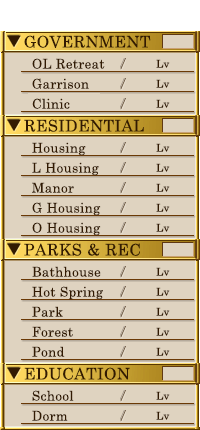
<style>
.page{position:relative;width:200px;height:430px;background:#dfd3c0}
.page>*{position:absolute;margin:0}
.t1{font:16px "CenturySchoolbook";letter-spacing:0.025em;color:#321a02}
.t2{font:13.3px "CenturySchoolbook";letter-spacing:0.025em;color:#321a02}
.t3{font:10.7px "CenturySchoolbook";letter-spacing:0.025em;color:#321a02}
</style>
<div class="page">
<p class="t1" style="left:24px;top:35px;width:127px;height:13px">GOVERNMENT</p>
<p class="t2" style="left:32px;top:58px;width:73px;height:11px">OL Retreat</p>
<p class="t3" style="left:156px;top:59px;width:14px;height:9px">Lv</p>
<p class="t2" style="left:32px;top:78px;width:57px;height:11px">Garrison</p>
<p class="t3" style="left:156px;top:79px;width:14px;height:9px">Lv</p>
<p class="t2" style="left:32px;top:98px;width:38px;height:11px">Clinic</p>
<p class="t3" style="left:156px;top:99px;width:14px;height:9px">Lv</p>
<p class="t1" style="left:24px;top:119px;width:120px;height:13px">RESIDENTIAL</p>
<p class="t2" style="left:32px;top:142px;width:54px;height:14px">Housing</p>
<p class="t3" style="left:156px;top:143px;width:14px;height:9px">Lv</p>
<p class="t2" style="left:32px;top:162px;width:67px;height:14px">L Housing</p>
<p class="t3" style="left:156px;top:163px;width:14px;height:9px">Lv</p>
<p class="t2" style="left:32px;top:182px;width:42px;height:11px">Manor</p>
<p class="t3" style="left:156px;top:183px;width:14px;height:9px">Lv</p>
<p class="t2" style="left:32px;top:202px;width:69px;height:14px">G Housing</p>
<p class="t3" style="left:156px;top:203px;width:14px;height:9px">Lv</p>
<p class="t2" style="left:32px;top:222px;width:69px;height:14px">O Housing</p>
<p class="t3" style="left:156px;top:223px;width:14px;height:9px">Lv</p>
<p class="t1" style="left:24px;top:243px;width:116px;height:13px">PARKS &amp; REC</p>
<p class="t2" style="left:32px;top:266px;width:69px;height:11px">Bathhouse</p>
<p class="t3" style="left:156px;top:267px;width:14px;height:9px">Lv</p>
<p class="t2" style="left:32px;top:286px;width:71px;height:14px">Hot Spring</p>
<p class="t3" style="left:156px;top:287px;width:14px;height:9px">Lv</p>
<p class="t2" style="left:32px;top:306px;width:31px;height:11px">Park</p>
<p class="t3" style="left:156px;top:307px;width:14px;height:9px">Lv</p>
<p class="t2" style="left:32px;top:326px;width:41px;height:11px">Forest</p>
<p class="t3" style="left:156px;top:327px;width:14px;height:9px">Lv</p>
<p class="t2" style="left:32px;top:346px;width:33px;height:11px">Pond</p>
<p class="t3" style="left:156px;top:347px;width:14px;height:9px">Lv</p>
<p class="t1" style="left:24px;top:367px;width:106px;height:13px">EDUCATION</p>
<p class="t2" style="left:32px;top:390px;width:42px;height:11px">School</p>
<p class="t3" style="left:156px;top:391px;width:14px;height:9px">Lv</p>
<p class="t2" style="left:32px;top:410px;width:36px;height:11px">Dorm</p>
<p class="t3" style="left:156px;top:411px;width:14px;height:9px">Lv</p>
</div>
